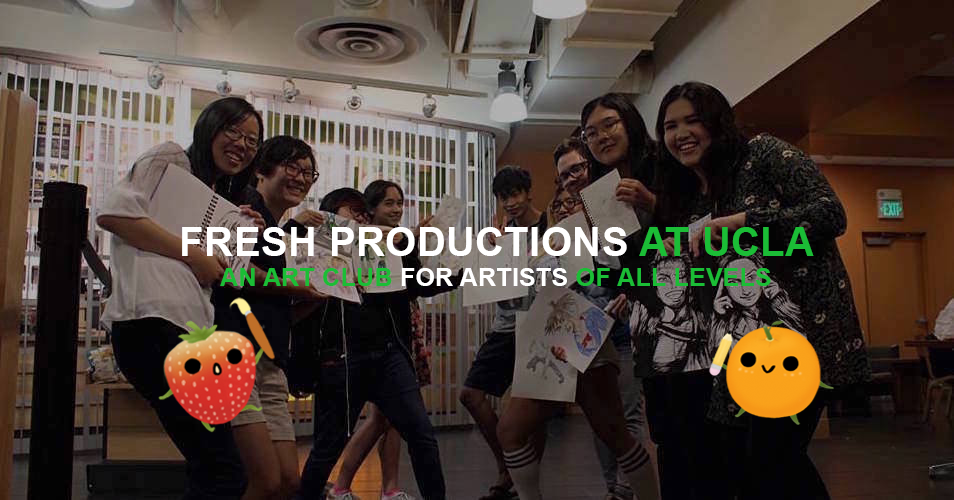
<style>
.page{position:relative;width:954px;height:500px}
.page>*{position:absolute;margin:0}
.t1{font:40px "Arial-BoldMT";letter-spacing:0.01em;color:#ffffff}
.t2{font:40px "Arial-BoldMT";letter-spacing:0.01em;color:#1bbd36}
.t3{font:25px "Arial-BoldMT";letter-spacing:0.01em;color:#1bbd36}
.t4{font:25px "Arial-BoldMT";letter-spacing:0.01em;color:#ffffff}
</style>
<div class="page">
<p class="t1" style="left:182px;top:227px;width:632px;height:59px;text-align:center">FRESH PRODUCTIONS <span class="t2">AT UCLA<br></span><span class="t3">AN ART CLUB </span><span class="t4">FOR ARTISTS </span><span class="t3">OF ALL LEVELS</span></p>
</div>
